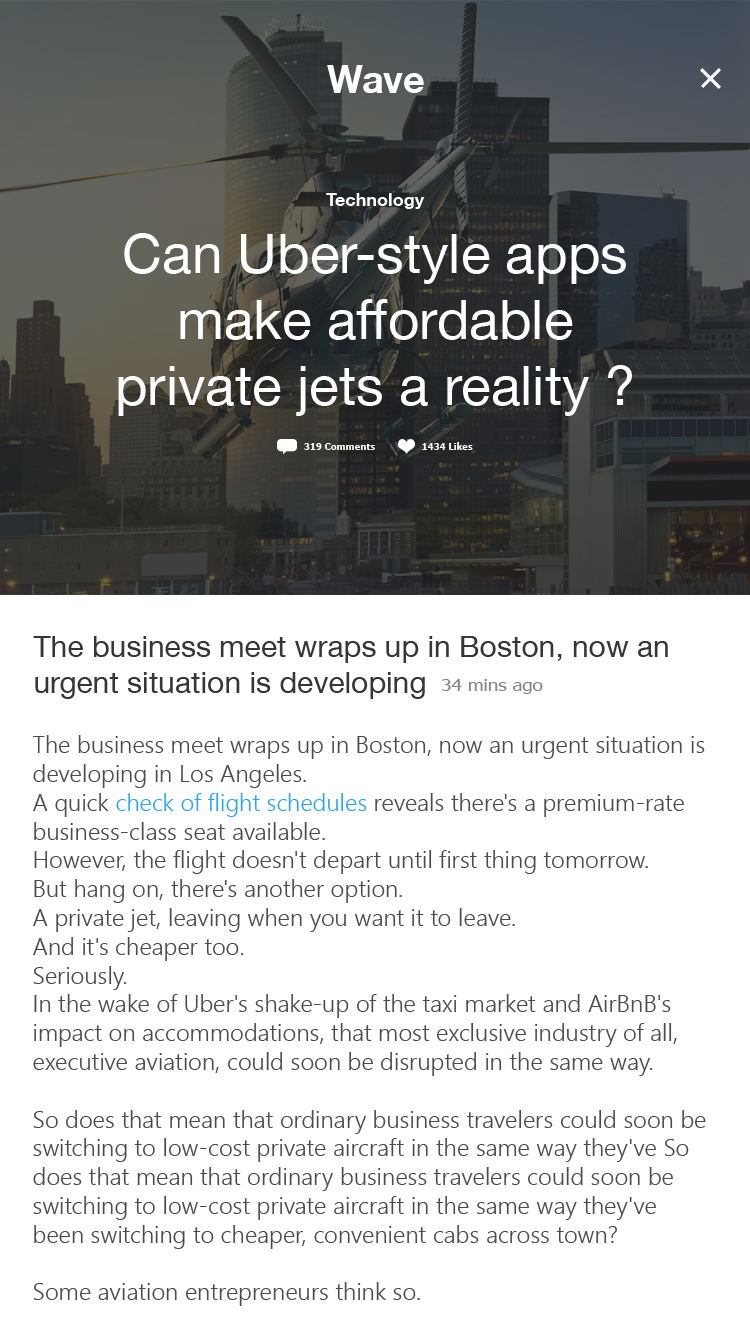
<style>
.page{position:relative;width:750px;height:1334px;background:#ffffff}
.page>*{position:absolute;margin:0}
.t1{font:38.8px "HelveticaNeueLTArabic-Bold";color:#ffffff}
.t2{font:18px "HelveticaNeueLTArabic-Bold";color:#ffffff}
.t3{font:55px "HelveticaNeueLTArabic-Roman";color:#ffffff}
.t4{font:8.8px "Tahoma-Bold";color:#fcfcfc;scale:1.07 1}
.t5{font:30px "HelveticaNeueLTArabic-Roman";color:#282727}
.t6{font:16.4px "Tahoma";color:#868686;scale:1.14 1}
.t7{font:24px "SegoeUI-Semilight";color:#4c4b4b}
</style>
<div class="page">
<p class="t1" style="left:327px;top:65px;width:97px;height:28px">Wave</p>
<p class="t2" style="left:326px;top:193px;width:99px;height:16px">Technology</p>
<p class="t3" style="left:118px;top:233px;width:514px;height:183px;text-align:center">Can Uber-style apps make affordable <br>private jets a reality ?</p>
<p class="t4" style="left:304px;top:443px;width:71px;height:7px">319 Comments</p>
<p class="t4" style="left:422px;top:442px;width:51px;height:8px">1434 Likes</p>
<p class="t5" style="left:33px;top:636px;width:635px;height:63px;opacity:0.93">The business meet wraps up in Boston, now an urgent situation is developing</p>
<p class="t6" style="left:442px;top:679px;width:101px;height:15px">34 mins ago</p>
<p class="t7" style="left:33px;top:735px;width:673px;height:571px">The business meet wraps up in Boston, now an urgent situation is developing in Los Angeles.<br>A quick check of flight schedules reveals there's a premium-rate business-class seat available.<br>However, the flight doesn't depart until first thing tomorrow.<br>But hang on, there's another option.<br>A private jet, leaving when you want it to leave.<br>And it's cheaper too.<br>Seriously.<br>In the wake of Uber's shake-up of the taxi market and AirBnB's impact on accommodations, that most exclusive industry of all, executive aviation, could soon be disrupted in the same way.<br><br>So does that mean that ordinary business travelers could soon be switching to low-cost private aircraft in the same way they've So does that mean that ordinary business travelers could soon be switching to low-cost private aircraft in the same way they've been switching to cheaper, convenient cabs across town?<br><br>Some aviation entrepreneurs think so.<br><br>They're creating simple, sleek mobile apps to optimize spare capacity in the private jet market and create a smooth booking experience.<br><br>Obviously private aviation isn't going to be for the masses, but what if this exclusive preserve of the super-rich is about to become accessible to the merely affluent -- those that today fill the front cabin section of commercial aircraft?<br><br>Instead of calling a broker or buying into shared exec jet ownership, these new apps allow travelers to secure a private aircraft with just a few clicks and no membership fees.</p>
</div>
